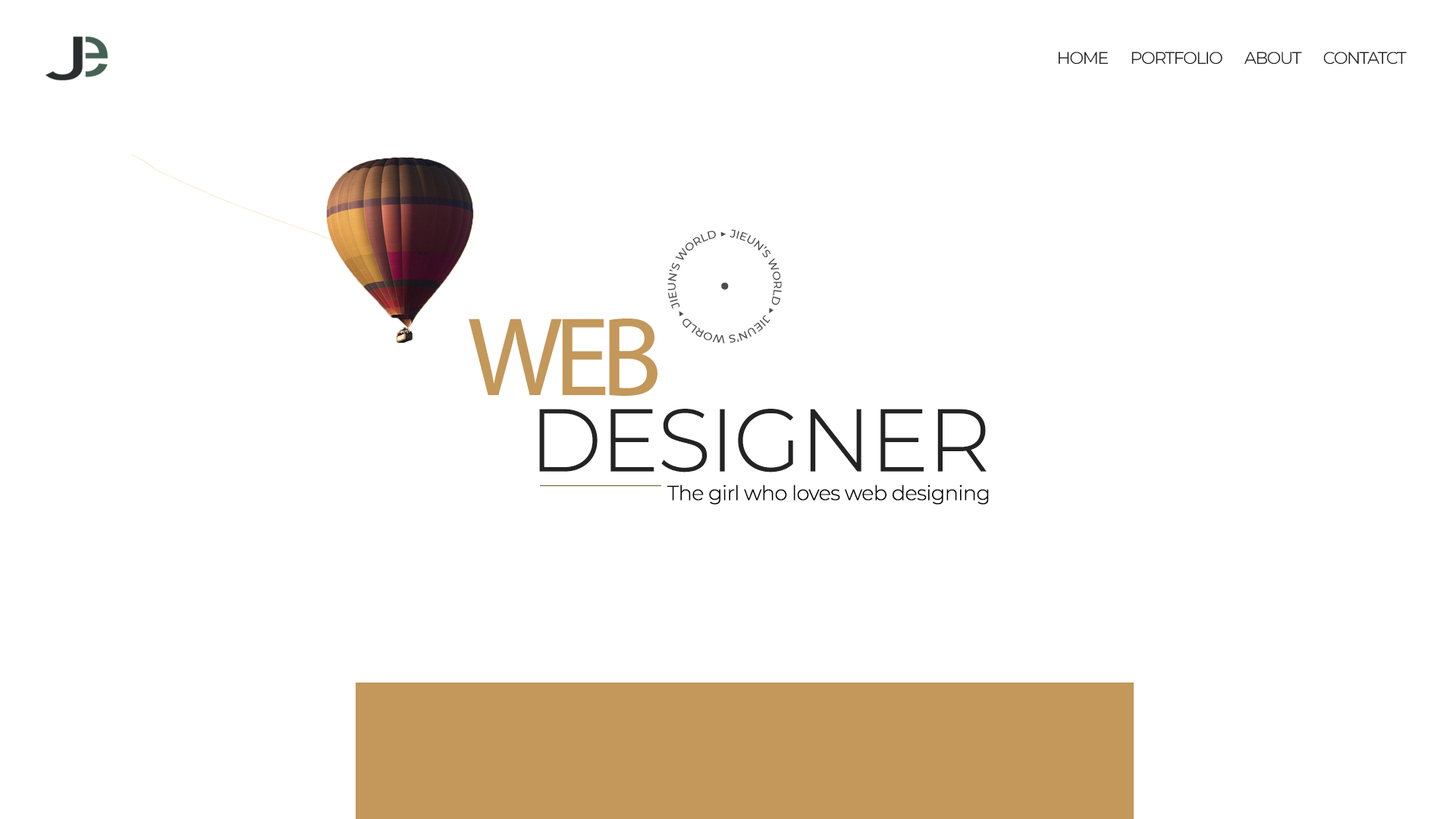
<style>
.page{position:relative;width:1456px;height:819px;background:#ffffff}
.page>*{position:absolute;margin:0}
.t1{font:17.1px "Montserrat-Regular";letter-spacing:-0.075em;color:#222222}
.t2{font:112.5px "MyriadPro-Regular";letter-spacing:-0.075em;color:#c3985a}
.t3{font:88.6px "Montserrat-Light";letter-spacing:-0.05em;color:#232323;font-weight:bold}
.t4{font:20.6px "Montserrat-Light";letter-spacing:-0.05em;color:#000000;font-weight:bold}
</style>
<div class="page">
<p class="t1" style="left:1059px;top:52px;width:348px;height:12px">HOME       PORTFOLIO       ABOUT       CONTATCT</p>
<p class="t2" style="left:469px;top:318px;width:188px;height:78px">WEB</p>
<p class="t3" style="left:539px;top:409px;width:448px;height:63px">DESIGNER</p>
<p class="t4" style="left:667px;top:485px;width:322px;height:19px">The girl who loves web designing</p>
</div>
